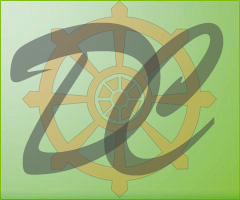
<style>
.page{position:relative;width:240px;height:200px}
.page>*{position:absolute;margin:0}
.t1{font:230px "BrushScriptMT";color:#7c866b}
.t2{font:190px "BrushScriptMT";color:#717b57}
</style>
<div class="page">
<p class="t1" style="left:10px;top:22px;width:151px;height:153px">D</p>
<p class="t2" style="left:104px;top:22px;width:120px;height:154px">C</p>
</div>
